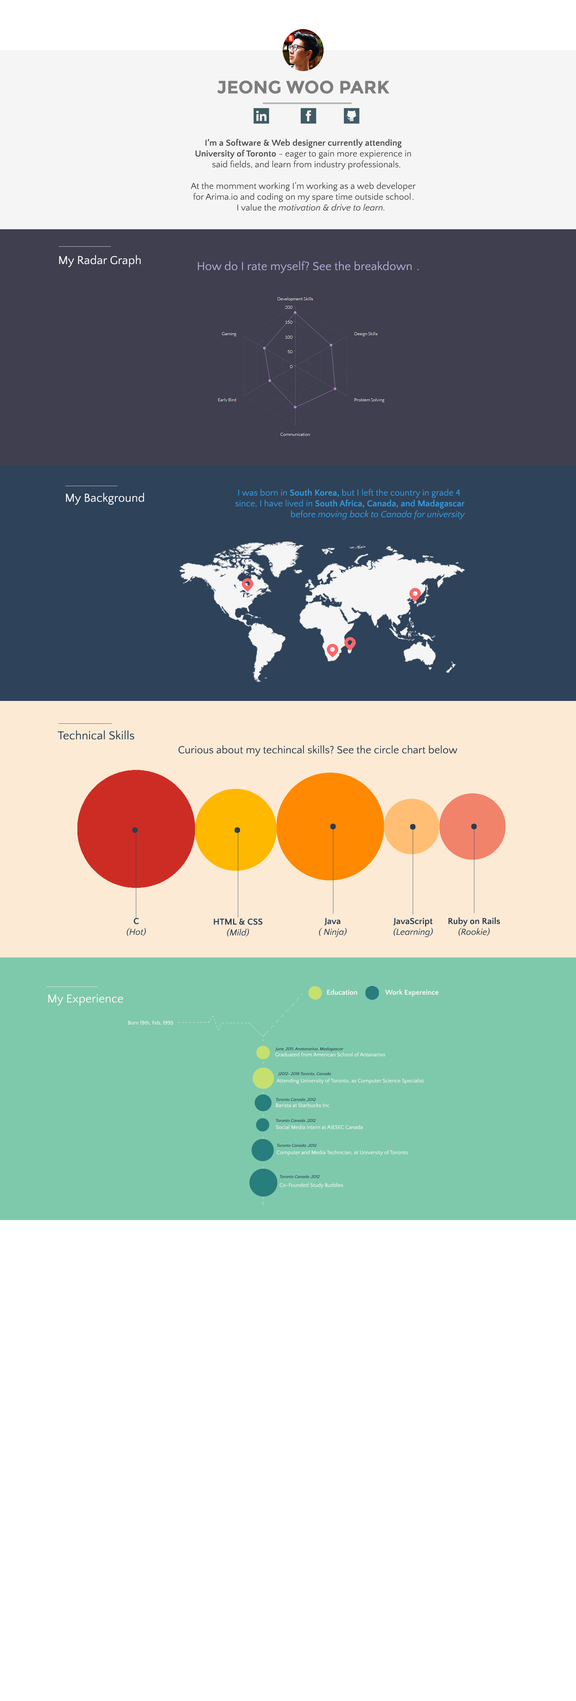
<style>
.page{position:relative;width:576px;height:1701px;background:#ffffff}
.page>*{position:absolute;margin:0}
.t1{font:18px "Montserrat-Bold";color:#7e7e7e}
.t2{font:9px "QuattrocentoSans";color:#4f4f4f}
.t3{font:9px "QuattrocentoSans-Bold";color:#4f4f4f}
.t4{font:9px "QuattrocentoSans-Italic";color:#4f4f4f}
.t5{font:12px "QuattrocentoSans";color:#f5f5f5}
.t6{font:12px "QuattrocentoSans";color:#aea8d3}
.t7{font:9px "QuattrocentoSans";color:#3498db}
.t8{font:9px "QuattrocentoSans-Bold";color:#3498db}
.t9{font:9px "QuattrocentoSans-Italic";color:#3498db}
.t10{font:12px "QuattrocentoSans";color:#2c3e50}
.t11{font:10.8px "QuattrocentoSans";color:#2c3e50}
.t12{font:9px "QuattrocentoSans-Italic";color:#2c3e50}
.t13{font:9px "QuattrocentoSans-Bold";color:#2c3e50}
.t14{font:7.2px "QuattrocentoSans-Bold";color:#f5f5f5}
.t15{font:5.4px "QuattrocentoSans";color:#f5f5f5}
.t16{font:4.2px "QuattrocentoSans-Italic";color:#1c344c}
</style>
<div class="page">
<p class="t1" style="left:217px;top:80px;width:172px;height:14px">JEONG WOO PARK</p>
<p class="t2" style="left:191px;top:139px;width:225px;height:72px;text-align:center"><span class="t3">I’m a Software &amp; Web designer currently attending <br>University of Toronto</span> - eager to gain more expierence in <br>said fields, and learn from industry professionals   <br><br>At the momment working I’m working as a web developer <br>for Arima.io and coding on my spare time outside school<br>I value the <span class="t4">motivation &amp; drive to learn</span></p>
<p class="t2" style="left:399px;top:167px;width:1px;height:1px">.</p>
<p class="t2" style="left:383px;top:210px;width:1px;height:1px">.</p>
<p class="t2" style="left:413px;top:199px;width:0px;height:1px">.</p>
<p class="t5" style="left:59px;top:255px;width:82px;height:12px">My Radar Graph</p>
<p class="t6" style="left:417px;top:269px;width:2px;height:1px">.</p>
<p class="t5" style="left:66px;top:493px;width:78px;height:12px">My Background</p>
<p class="t7" style="left:235px;top:489px;width:230px;height:31px">I was born in <span class="t8">South Korea,</span> but I left the country in grade 4<br>since, I have lived in <span class="t8">South Africa, Canada, and Madagascar <br></span>before <span class="t9">moving back to Canada for university</span></p>
<p class="t10" style="left:58px;top:730px;width:76px;height:10px">Technical Skills</p>
<p class="t11" style="left:179px;top:745px;width:279px;height:11px">Curious about my techincal skills? See the circle chart below</p>
<p class="t12" style="left:127px;top:918px;width:19px;height:18px;text-align:center"><span class="t13">C<br></span>(Hot)</p>
<p class="t12" style="left:319px;top:918px;width:28px;height:19px;text-align:center"><span class="t13">Java<br></span>(Ninja )</p>
<p class="t13" style="left:393px;top:918px;width:40px;height:19px;text-align:center">JavaScript<br><span class="t12">(Learning)</span></p>
<p class="t13" style="left:449px;top:917px;width:51px;height:19px;text-align:center">Ruby on Rails<br><span class="t12">(Rookie)</span></p>
<p class="t13" style="left:214px;top:918px;width:49px;height:18px;text-align:center">HTML &amp; CSS<br><span class="t12">(Mild)</span></p>
<p class="t14" style="left:327px;top:989px;width:30px;height:6px">Education</p>
<p class="t14" style="left:385px;top:989px;width:54px;height:8px">Work Expereince</p>
<p class="t15" style="left:128px;top:1020px;width:45px;height:5px">Born 19th, Feb, 1995</p>
<p class="t16" style="left:275px;top:1047px;width:69px;height:4px">June, 2011, Anatanarivo, Madagascar</p>
<p class="t15" style="left:275px;top:1052px;width:110px;height:4px">Graduated from American School of Antanarivo</p>
<p class="t16" style="left:278px;top:1072px;width:53px;height:4px">J2012- 2016 Toronto, Canada</p>
<p class="t15" style="left:277px;top:1078px;width:147px;height:6px">Attending University of Toronto, as Computer Science Specialist</p>
<p class="t16" style="left:276px;top:1097px;width:40px;height:4px">2012, Toronto Canada</p>
<p class="t15" style="left:275px;top:1103px;width:54px;height:4px">Barista at Starbucks Inc.</p>
<p class="t16" style="left:276px;top:1118px;width:40px;height:4px">2012, Toronto Canada</p>
<p class="t15" style="left:276px;top:1125px;width:87px;height:4px">Social Media Intern at AIESEC Canada</p>
<p class="t16" style="left:277px;top:1143px;width:40px;height:4px">2012, Toronto Canada</p>
<p class="t15" style="left:277px;top:1150px;width:131px;height:6px">Computer and Media Technician, at University of Toronto</p>
<p class="t16" style="left:280px;top:1175px;width:40px;height:3px">2012, Toronto Canada</p>
<p class="t15" style="left:280px;top:1183px;width:63px;height:5px">Co-Founded Study Buddies</p>
</div>
